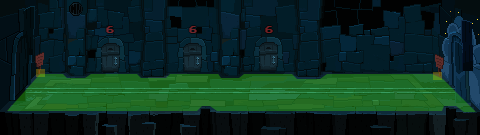
<style>
.page{position:relative;width:480px;height:135px}
.page>*{position:absolute;margin:0}
.t1{font:7.9px "PressStart2P-Regular";color:#74272e}
.t2{font:7.9px "PressStart2P-Regular";color:#74252a}
.t3{font:7.9px "PressStart2P-Regular";color:#732023}
</style>
<div class="page">
<p class="t1" style="left:106px;top:26px;width:8px;height:7px">6</p>
<p class="t2" style="left:189px;top:26px;width:8px;height:7px">6</p>
<p class="t3" style="left:265px;top:26px;width:8px;height:7px">6</p>
</div>
